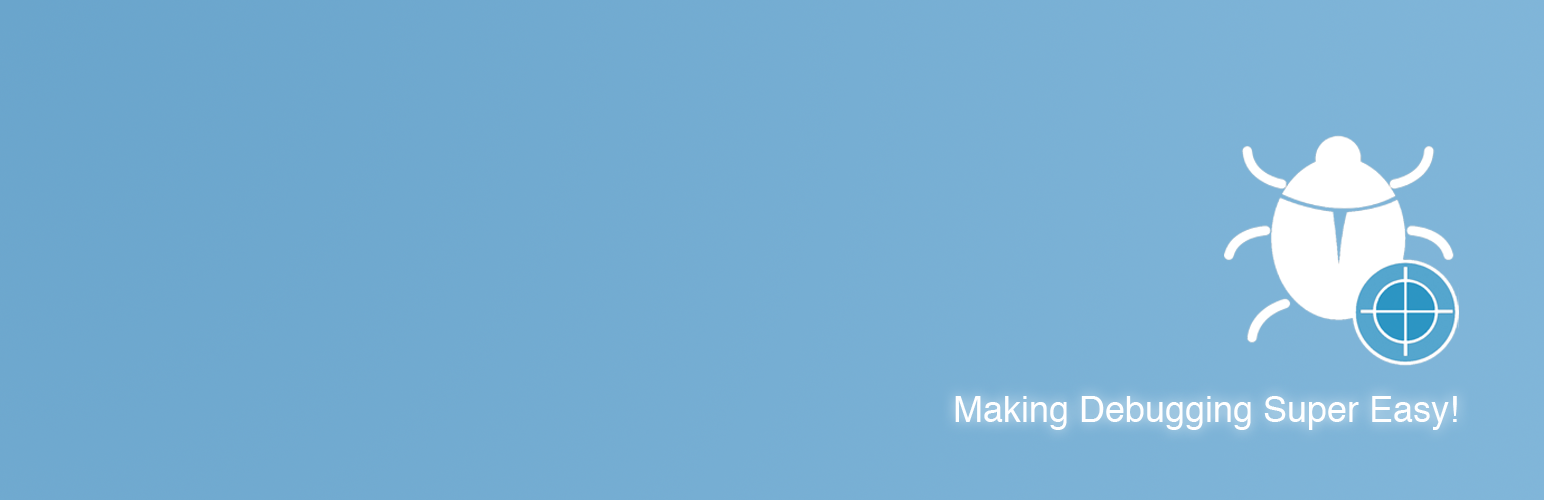
<style>
.page{position:relative;width:1544px;height:500px}
.page>*{position:absolute;margin:0}
.t1{font:36px "Helvetica";color:#ffffff}
</style>
<div class="page">
<p class="t1" style="left:955px;top:396px;width:502px;height:34px">Making Debugging Super Easy!</p>
</div>
